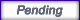
<style>
.page{position:relative;width:80px;height:20px;background:#ffffff}
.page>*{position:absolute;margin:0}
.t1{font:12px "ArialMT";color:#666666;font-weight:bold;font-style:italic}
</style>
<div class="page">
<p class="t1" style="left:17px;top:5px;width:46px;height:12px">Pending</p>
<p class="t1" style="left:17px;top:5px;width:46px;height:12px">Pending</p>
</div>
